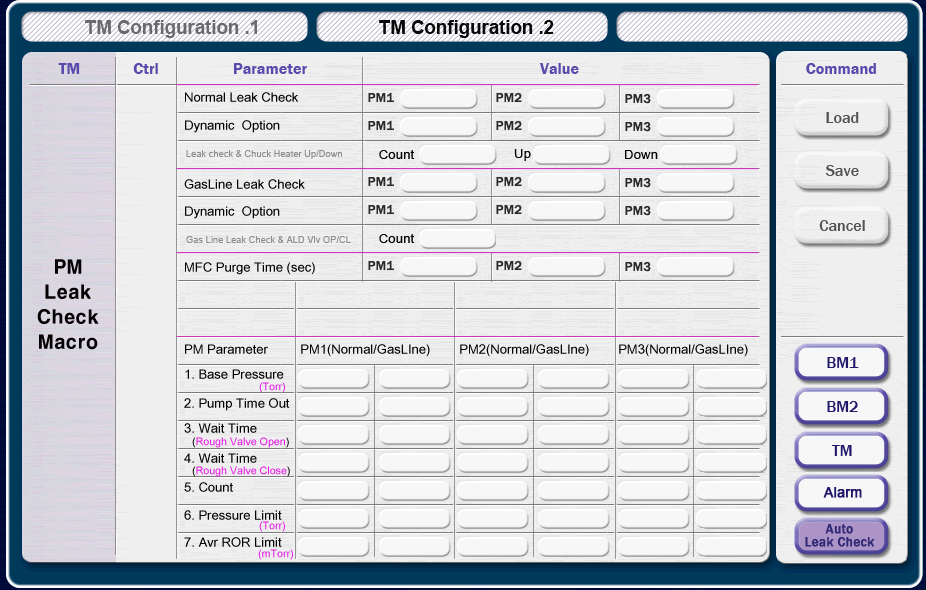
<style>
.page{position:relative;width:926px;height:590px;background:#efefef}
.page>*{position:absolute;margin:0}
.t1{font:13px "ArialUnicodeMS";color:#040004}
.t2{font:9.3px "ArialUnicodeMS";color:#8e8d92}
.t3{font:13.3px "ArialUnicodeMS";color:#040004}
.t4{font:18.7px/25px "HYgtrE";color:#040004}
.t5{font:10.7px "ArialUnicodeMS";color:#e616e6}
.t6{font:10.7px "ArialUnicodeMS";color:#040004}
</style>
<div class="page">
<p class="t1" style="left:185px;top:92px;width:114px;height:10px">Normal Leak Check</p>
<p class="t1" style="left:185px;top:120px;width:95px;height:13px">Dynamic  Option</p>
<p class="t2" style="left:186px;top:150px;width:156px;height:9px">Leak check &amp; Chuck Heater Up/Down</p>
<p class="t3" style="left:379px;top:150px;width:36px;height:9px">Count</p>
<p class="t3" style="left:514px;top:149px;width:17px;height:12px">Up</p>
<p class="t3" style="left:625px;top:150px;width:33px;height:9px">Down</p>
<p class="t1" style="left:184px;top:179px;width:121px;height:10px">GasLine Leak Check</p>
<p class="t1" style="left:185px;top:206px;width:95px;height:13px">Dynamic  Option</p>
<p class="t2" style="left:186px;top:236px;width:165px;height:7px">Gas Line Leak Check &amp; ALD Vlv OP/CL</p>
<p class="t3" style="left:379px;top:234px;width:36px;height:9px">Count</p>
<p class="t4" style="left:37px;top:259px;width:62px;height:91px;text-align:center">PM<br>Leak<br>Check<br>Macro</p>
<p class="t1" style="left:185px;top:262px;width:130px;height:13px">MFC Purge Time (sec)</p>
<p class="t1" style="left:185px;top:344px;width:563px;height:13px">PM Parameter         PM1(Normal/GasLIne)        PM2(Normal/GasLIne)        PM3(Normal/GasLIne)</p>
<p class="t1" style="left:185px;top:369px;width:99px;height:10px">1. Base Pressure</p>
<p class="t5" style="left:259px;top:382px;width:26px;height:11px">(Torr)</p>
<p class="t1" style="left:184px;top:398px;width:106px;height:13px">2. Pump Time Out</p>
<p class="t1" style="left:184px;top:423px;width:73px;height:10px">3. Wait Time</p>
<p class="t5" style="left:192px;top:437px;width:97px;height:11px"><span class="t6">(</span>Rough Valve Open<span class="t6">)</span></p>
<p class="t1" style="left:184px;top:453px;width:73px;height:10px">4. Wait Time</p>
<p class="t5" style="left:192px;top:466px;width:98px;height:11px"><span class="t6">(</span>Rough Valve Close<span class="t6">)</span></p>
<p class="t1" style="left:184px;top:482px;width:49px;height:10px">5. Count</p>
<p class="t1" style="left:184px;top:510px;width:98px;height:10px">6. Pressure Limit</p>
<p class="t5" style="left:259px;top:521px;width:26px;height:11px">(Torr)</p>
<p class="t1" style="left:184px;top:537px;width:98px;height:10px">7. Avr ROR Limit         <span class="t6">(mTor)</span></p>
<p class="t5" style="left:258px;top:549px;width:35px;height:11px">(mTorr)</p>
</div>
